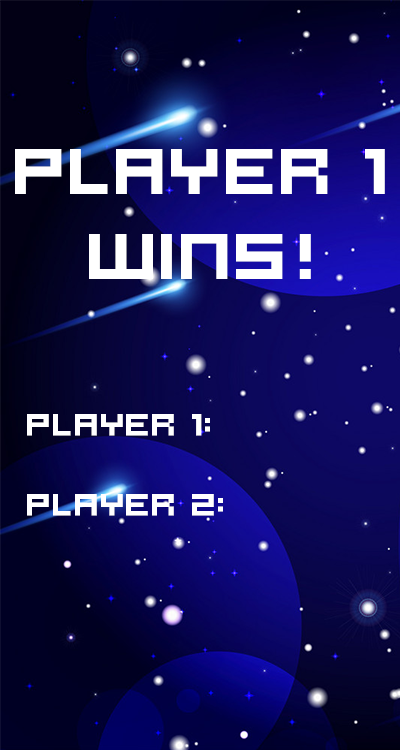
<style>
.page{position:relative;width:400px;height:750px}
.page>*{position:absolute;margin:0}
.t1{font:70.8px "Hooge0553";color:#ffffff;font-weight:bold}
.t2{font:33.3px "Hooge0553";color:#ffffff;font-weight:bold}
</style>
<div class="page">
<p class="t1" style="left:15px;top:149px;width:370px;height:130px;text-align:center">PLAYER 1<br>WINS!</p>
<p class="t2" style="left:27px;top:414px;width:196px;height:102px">PLAYER 1:<br><br>PLAYER 2:</p>
</div>
